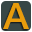
<style>
.page{position:relative;width:32px;height:32px;background:#374746}
.page>*{position:absolute;margin:0}
.t1{font:36.2px "HelveticaNeueLTStd-Md";color:#e89c0c;scale:1.05 1}
</style>
<div class="page">
<p class="t1" style="left:3px;top:3px;width:26px;height:26px">A</p>
</div>
